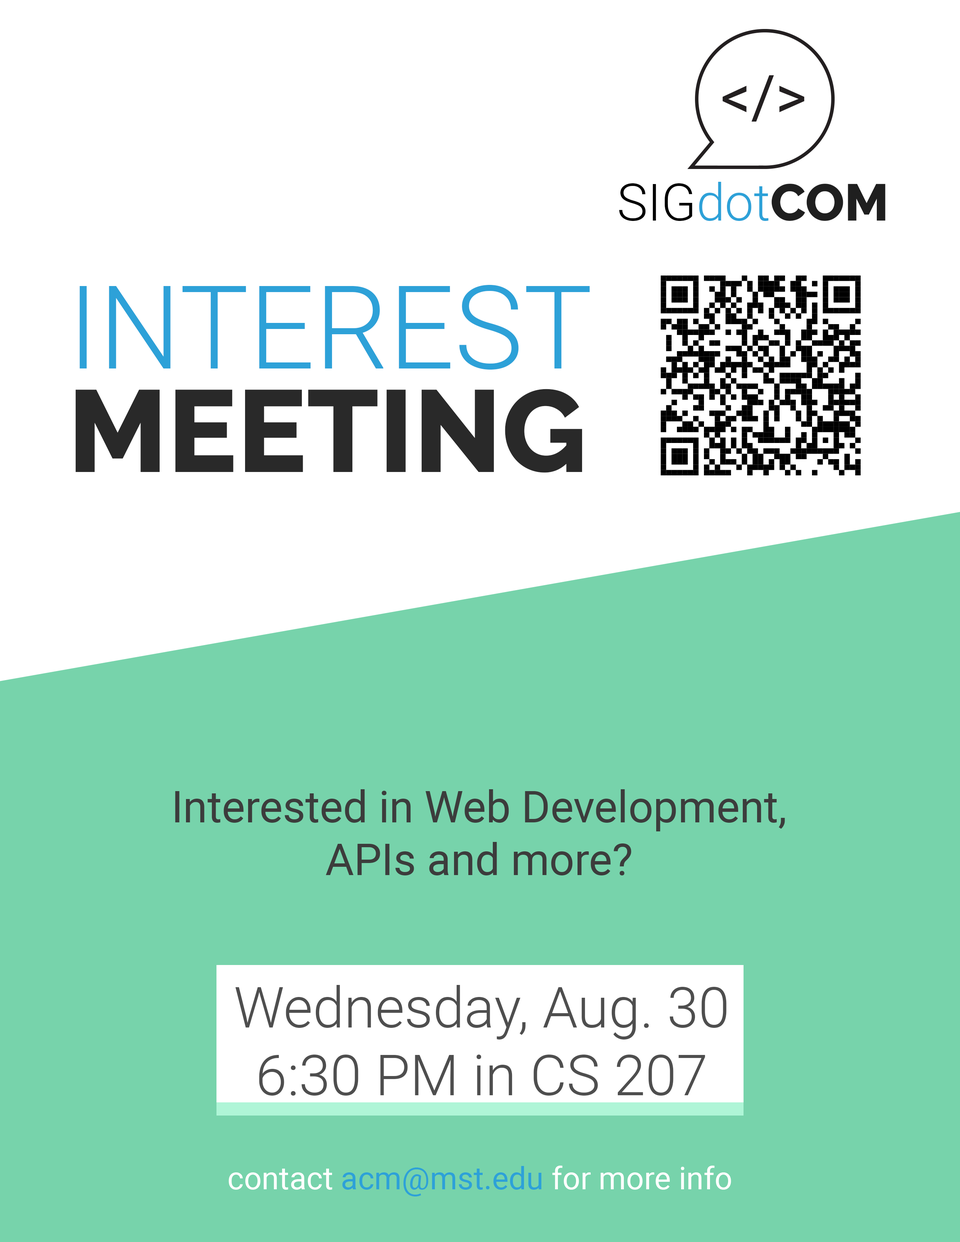
<style>
.page{position:relative;width:960px;height:1242px;background:#ffffff}
.page>*{position:absolute;margin:0}
.t1{font:51.4px "Roboto-Light";color:#000000}
.t2{font:51.4px "Roboto-Light";color:#2da1d8}
.t3{font:51.4px "Raleway-ExtraBold";color:#1f1f1f}
.t4{font:116.1px/103.5px "Roboto-Light";color:#2da1d8}
.t5{font:116.1px/103.5px "Raleway-ExtraBold";color:#292929}
.t6{font:43.9px "Roboto-Regular";color:#3c3c3c}
.t7{font:56.5px "Roboto-Light";color:#4e4e4e}
.t8{font:31.4px "Roboto-Regular";color:#ffffff}
.t9{font:31.4px "Roboto-Regular";color:#2da1d8}
</style>
<div class="page">
<p class="t1" style="left:619px;top:182px;width:266px;height:39px">SIG<span class="t2">dot</span><span class="t3">COM</span></p>
<p class="t4" style="left:75px;top:285px;width:515px;height:188px">INTEREST<br><span class="t5">MEETING</span></p>
<p class="t6" style="left:175px;top:789px;width:610px;height:87px;text-align:center">Interested in Web Development,<br>APIs and more?</p>
<p class="t7" style="left:235px;top:985px;width:492px;height:111px;text-align:center">Wednesday, Aug. 30<br>6:30 PM in CS 207</p>
<p class="t8" style="left:228px;top:1166px;width:503px;height:31px">contact <span class="t9">acm@mst.edu </span>for more info</p>
</div>
